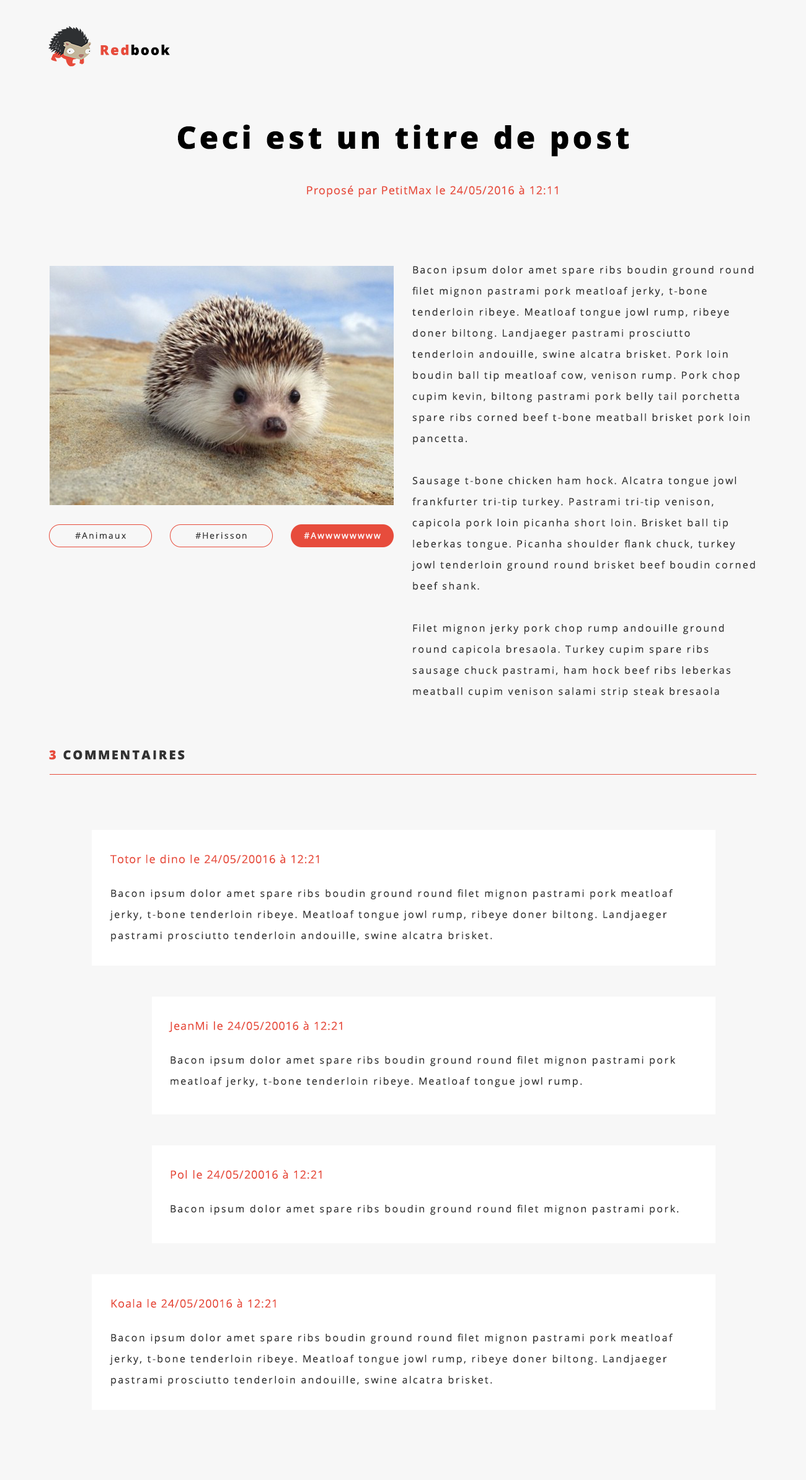
<style>
.page{position:relative;width:806px;height:1480px;background:#f7f7f7}
.page>*{position:absolute;margin:0}
.t1{font:13.6px "OpenSans-Extrabold";letter-spacing:0.1em;color:#000000}
.t2{font:13.6px "OpenSans-Extrabold";letter-spacing:0.1em;color:#e74c3c}
.t3{font:31px "OpenSans-Extrabold";letter-spacing:0.1em;color:#000000}
.t4{font:11.2px "OpenSans";letter-spacing:0.06em;color:#e74c3c}
.t5{font:9.9px/21.1px "OpenSans";letter-spacing:0.14em;color:#323232}
.t6{font:8.7px "OpenSans";letter-spacing:0.14em;color:#323232}
.t7{font:8.7px "OpenSans";letter-spacing:0.14em;color:#ffffff}
.t8{font:12.4px "OpenSans-Extrabold";letter-spacing:0.14em;color:#323232;text-transform:uppercase}
.t9{font:12.4px "OpenSans-Extrabold";letter-spacing:0.14em;color:#e74c3c;text-transform:uppercase}
.t10{font:9.9px "OpenSans";letter-spacing:0.14em;color:#323232}
</style>
<div class="page">
<p class="t1" style="left:100px;top:45px;width:70px;height:10px"><span class="t2">Red</span>book</p>
<p class="t3" style="left:178px;top:125px;width:450px;height:32px">Ceci est un titre de post</p>
<p class="t4" style="left:307px;top:185px;width:251px;height:12px">Proposé par PetitMax le 24/05/2016 à 12:11</p>
<p class="t5" style="left:412px;top:266px;width:343px;height:432px">Bacon ipsum dolor amet spare ribs boudin ground round filet mignon pastrami pork meatloaf jerky, t-bone tenderloin ribeye. Meatloaf tongue jowl rump, ribeye doner biltong. Landjaeger pastrami prosciutto tenderloin andouille, swine alcatra brisket. Pork loin boudin ball tip meatloaf cow, venison rump. Pork chop cupim kevin, biltong pastrami pork belly tail porchetta spare ribs corned beef t-bone meatball brisket pork loin pancetta.<br><br>Sausage t-bone chicken ham hock. Alcatra tongue jowl frankfurter tri-tip turkey. Pastrami tri-tip venison, capicola pork loin picanha short loin. Brisket ball tip leberkas tongue. Picanha shoulder flank chuck, turkey jowl tenderloin ground round brisket beef boudin corned beef shank.<br><br>Filet mignon jerky pork chop rump andouille ground round capicola bresaola. Turkey cupim spare ribs sausage chuck pastrami, ham hock beef ribs leberkas  meatball cupim venison salami strip steak bresaola</p>
<p class="t6" style="left:75px;top:532px;width:51px;height:7px">#Animaux</p>
<p class="t6" style="left:195px;top:532px;width:52px;height:7px">#Herisson</p>
<p class="t7" style="left:304px;top:532px;width:77px;height:7px">#Awwwwwwww</p>
<p class="t8" style="left:49px;top:750px;width:136px;height:10px"><span class="t9">3</span> commentaires</p>
<p class="t4" style="left:110px;top:854px;width:209px;height:9px">Totor le dino le 24/05/20016 à 12:21</p>
<p class="t5" style="left:110px;top:889px;width:562px;height:53px">Bacon ipsum dolor amet spare ribs boudin ground round filet mignon pastrami pork meatloaf jerky, t-bone tenderloin ribeye. Meatloaf tongue jowl rump, ribeye doner biltong. Landjaeger pastrami prosciutto tenderloin andouille, swine alcatra brisket.</p>
<p class="t4" style="left:169px;top:1021px;width:173px;height:12px">JeanMi le 24/05/20016 à 12:21</p>
<p class="t5" style="left:170px;top:1055px;width:505px;height:33px">Bacon ipsum dolor amet spare ribs boudin ground round filet mignon pastrami pork meatloaf jerky, t-bone tenderloin ribeye. Meatloaf tongue jowl rump.</p>
<p class="t4" style="left:170px;top:1169px;width:152px;height:10px">Pol le 24/05/20016 à 12:21</p>
<p class="t10" style="left:170px;top:1204px;width:509px;height:11px">Bacon ipsum dolor amet spare ribs boudin ground round filet mignon pastrami pork.</p>
<p class="t4" style="left:111px;top:1298px;width:165px;height:10px">Koala le 24/05/20016 à 12:21</p>
<p class="t5" style="left:110px;top:1333px;width:562px;height:53px">Bacon ipsum dolor amet spare ribs boudin ground round filet mignon pastrami pork meatloaf jerky, t-bone tenderloin ribeye. Meatloaf tongue jowl rump, ribeye doner biltong. Landjaeger pastrami prosciutto tenderloin andouille, swine alcatra brisket.</p>
</div>
